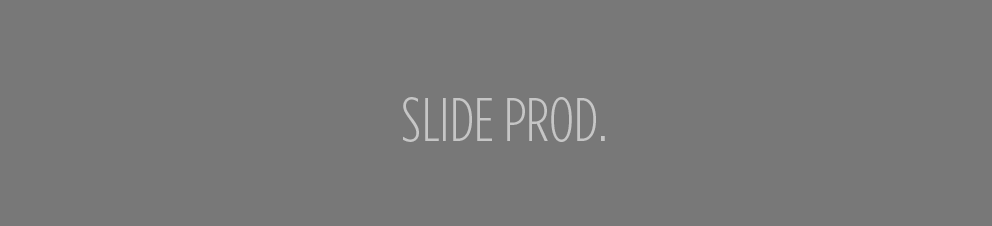
<style>
.page{position:relative;width:992px;height:226px;background:#787878}
.page>*{position:absolute;margin:0}
.t1{font:61.3px "GothamCond-Light";color:#c6c6c6}
</style>
<div class="page">
<p class="t1" style="left:403px;top:97px;width:202px;height:45px">SLIDE PROD.</p>
</div>
